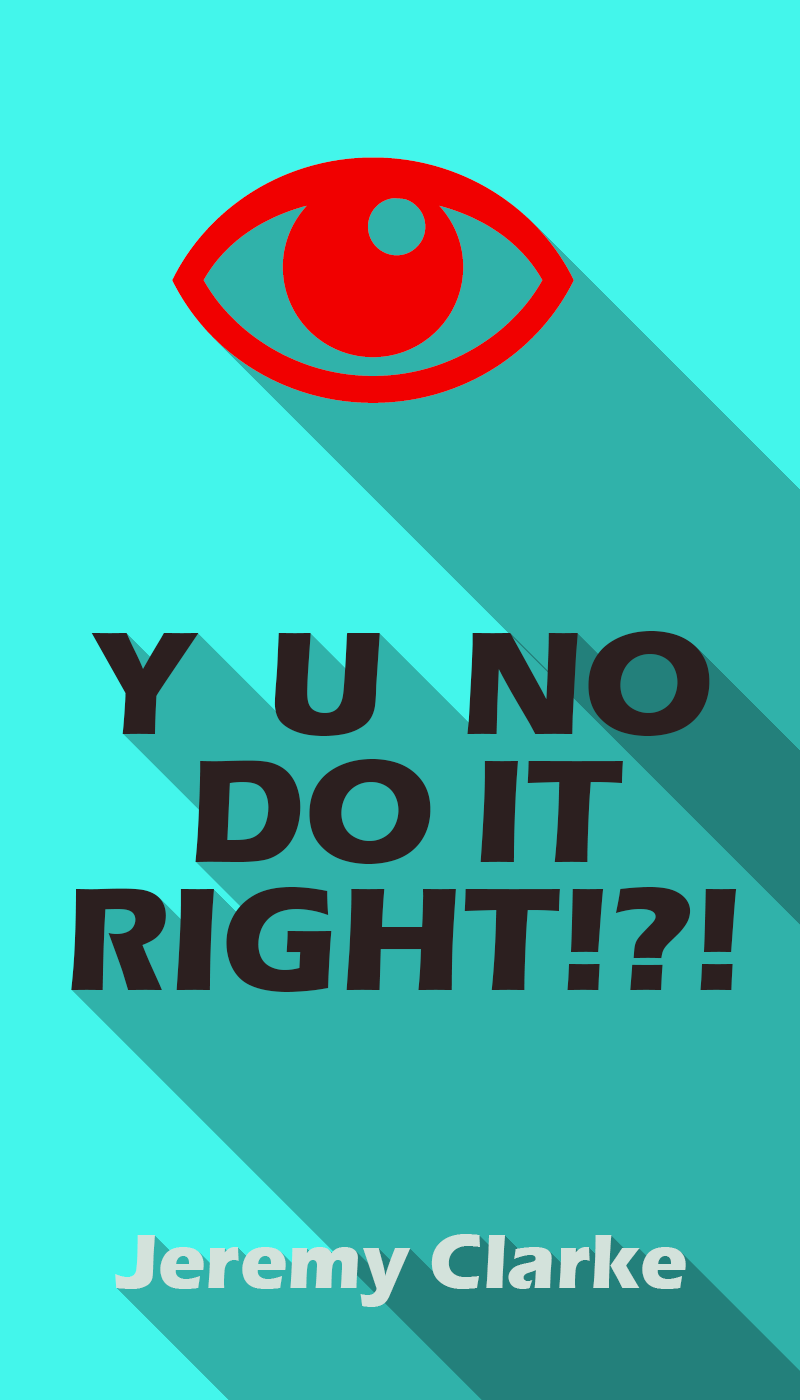
<style>
.page{position:relative;width:800px;height:1400px;background:#43f6eb}
.page>*{position:absolute;margin:0}
.t1{font:151px/128px "ErasITC-Bold";color:#2c1f1f}
.t2{font:80px "ErasITC-Bold";color:#d3e2db}
</style>
<div class="page">
<p class="t1" style="left:71px;top:631px;width:666px;height:361px;text-align:center">Y  U  NO<br>DO IT RIGHT!?!</p>
<p class="t2" style="left:115px;top:1234px;width:571px;height:73px">Jeremy Clarke</p>
</div>
